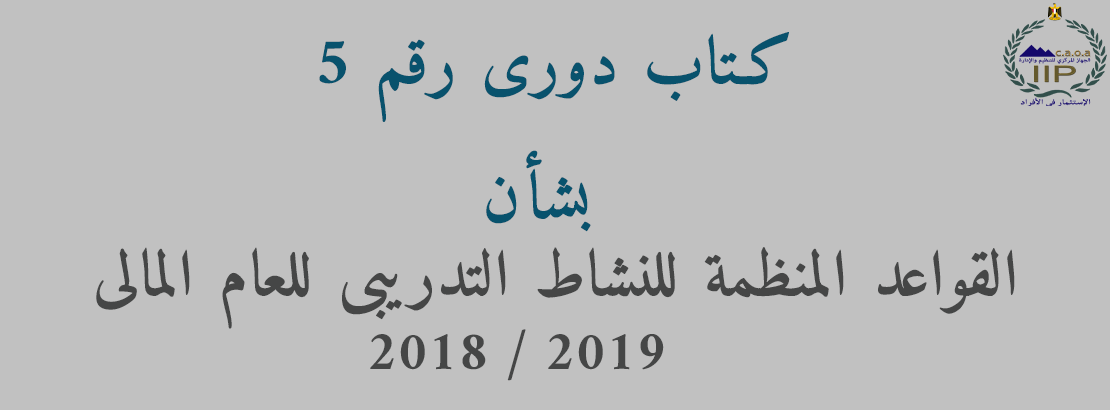
<style>
.page{position:relative;width:1110px;height:410px;background:#c1c1c1}
.page>*{position:absolute;margin:0}
.t1{font:66.5px "Amiri-Bold";letter-spacing:0.02em;color:#08526d}
.t2{font:63.9px "Amiri-Bold";letter-spacing:0.02em;color:#454646}
.t3{font:55.7px "Amiri-Bold";letter-spacing:0.02em;color:#454646}
</style>
<div class="page">
<p class="t1" style="left:319px;top:32px;width:470px;height:90px">كـتاب دورى رقم 5</p>
<p class="t1" style="left:486px;top:150px;width:105px;height:82px">بشأن</p>
<p class="t2" style="left:96px;top:247px;width:919px;height:82px">القواعد المنظمة للنشاط التدريبى للعام المالى</p>
<p class="t3" style="left:370px;top:329px;width:294px;height:52px">2018 / 2019</p>
</div>
